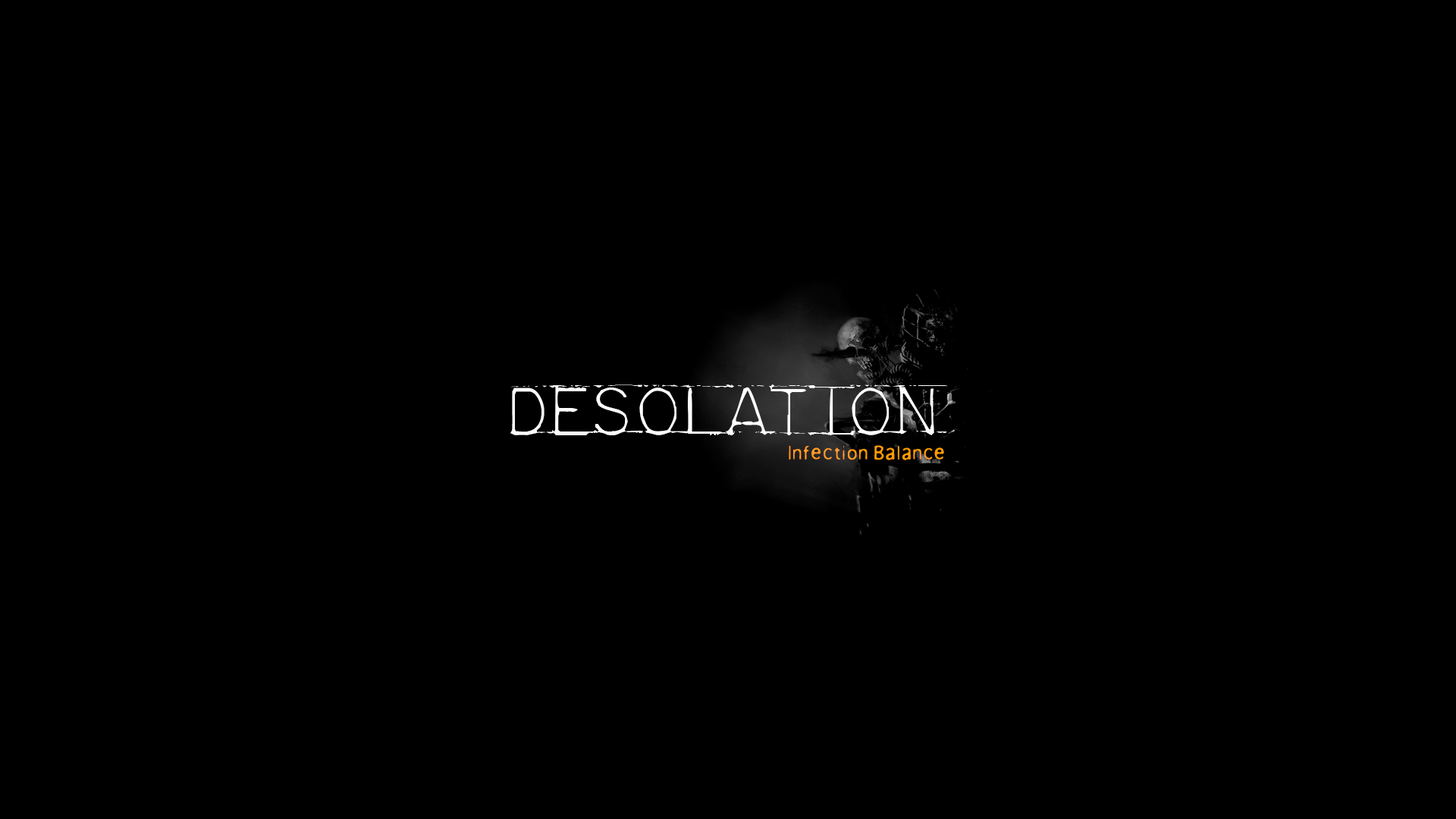
<style>
.page{position:relative;width:1456px;height:819px;background:#000000}
.page>*{position:absolute;margin:0}
.t1{font:50.6px "MechanicalFun";color:#fdfdfd}
.t2{font:19px "Anorexia"}
</style>
<div class="page">
<p class="t1" style="left:510px;top:384px;width:437px;height:51px">desolation</p>
<p class="t2" style="left:789px;top:445px;width:155px;height:15px">Infection Balance</p>
</div>
